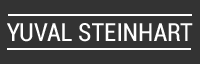
<style>
.page{position:relative;width:200px;height:64px;background:#333333}
.page>*{position:absolute;margin:0}
.t1{font:25px "Roboto-Condensed";color:#ffffff;text-transform:uppercase}
</style>
<div class="page">
<p class="t1" style="left:7px;top:23px;width:186px;height:19px">Yuval Steinhart</p>
</div>
